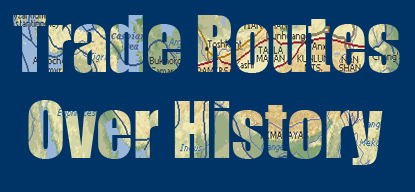
<style>
.page{position:relative;width:415px;height:192px;background:#003366}
.page>*{position:absolute;margin:0}
.t1{font:72px "Impact"}
</style>
<div class="page">
<p class="t1" style="left:13px;top:15px;width:387px;height:150px">Trade Routes <br> Over History</p>
</div>
